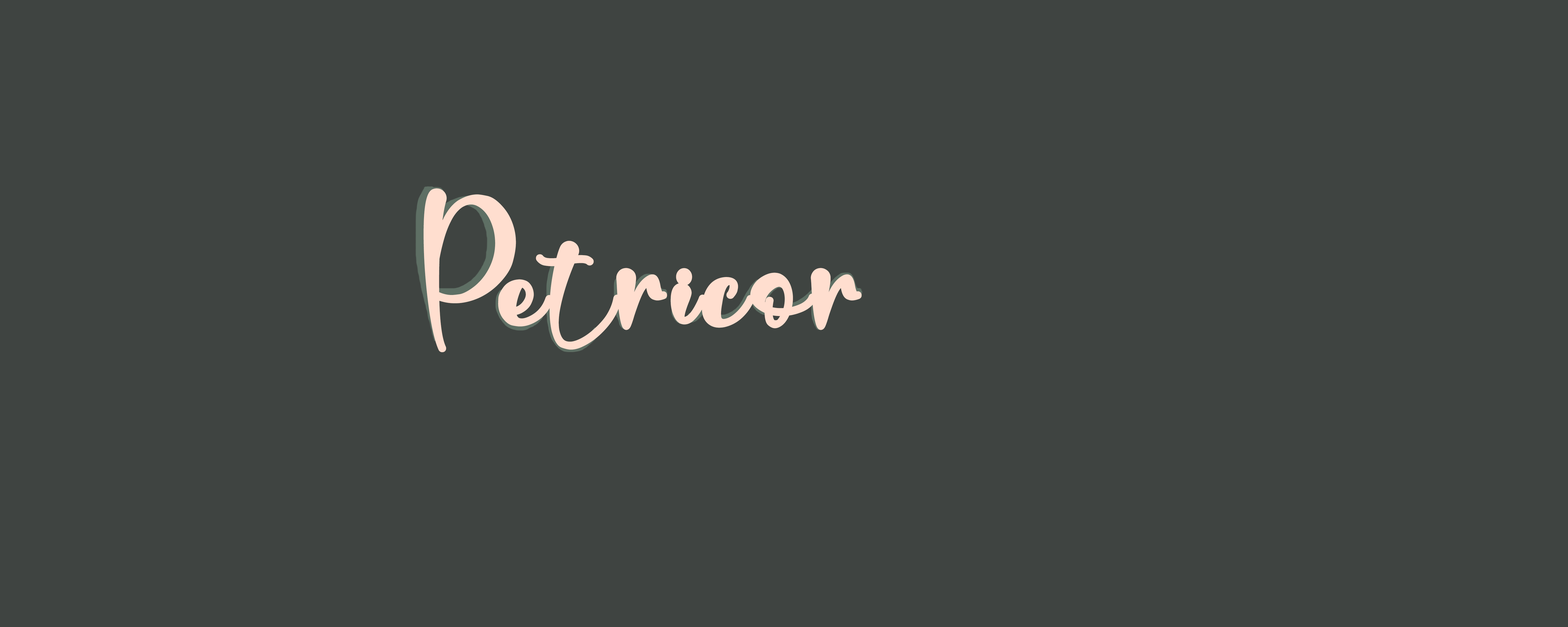
<style>
.page{position:relative;width:1568px;height:627px;background:#3f4441}
.page>*{position:absolute;margin:0}
.t1{font:166px "Mabelle";color:#ffdecf;font-weight:bold}
</style>
<div class="page">
<p class="t1" style="left:423px;top:188px;width:439px;height:164px">Petricor</p>
</div>
